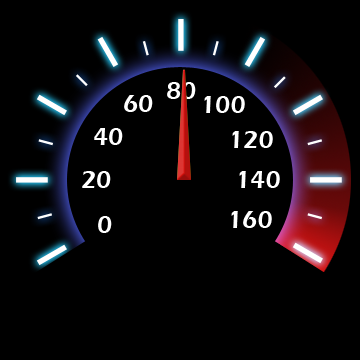
<style>
.page{position:relative;width:360px;height:360px;background:#000000}
.page>*{position:absolute;margin:0}
.t1{font:25px "ErasITC-Demi";color:#ffffff}
</style>
<div class="page">
<p class="t1" style="left:167px;top:82px;width:29px;height:17px">80</p>
<p class="t1" style="left:124px;top:95px;width:29px;height:17px">60</p>
<p class="t1" style="left:204px;top:96px;width:41px;height:17px">100</p>
<p class="t1" style="left:94px;top:128px;width:29px;height:17px">40</p>
<p class="t1" style="left:232px;top:131px;width:41px;height:17px">120</p>
<p class="t1" style="left:82px;top:171px;width:29px;height:17px">20</p>
<p class="t1" style="left:239px;top:171px;width:41px;height:17px">140</p>
<p class="t1" style="left:98px;top:216px;width:14px;height:17px">0</p>
<p class="t1" style="left:231px;top:211px;width:41px;height:17px">160</p>
</div>
